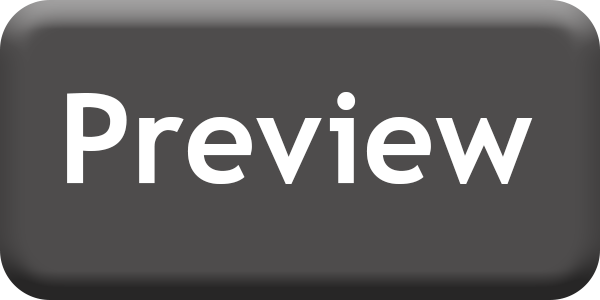
<style>
.page{position:relative;width:600px;height:300px;background:#4e4c4c}
.page>*{position:absolute;margin:0}
.t1{font:125px "TrebuchetMS-Bold";color:#ffffff}
</style>
<div class="page">
<p class="t1" style="left:67px;top:92px;width:466px;height:92px">Preview</p>
</div>
